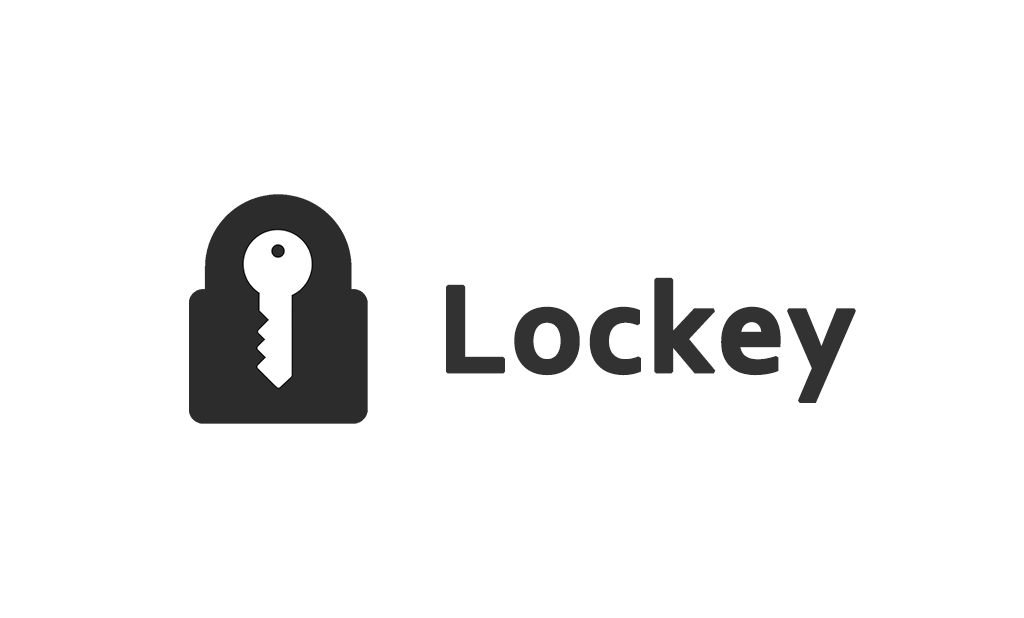
<style>
.page{position:relative;width:1024px;height:618px;background:#ffffff}
.page>*{position:absolute;margin:0}
.t1{font:130px "Corbel-Bold";color:#323232;font-weight:bold}
</style>
<div class="page">
<p class="t1" style="left:446px;top:277px;width:410px;height:126px">Lockey</p>
</div>
